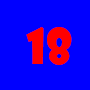
<style>
.page{position:relative;width:90px;height:90px;background:#0000ff}
.page>*{position:absolute;margin:0}
.t1{font:48px "ShowcardGothic-Reg";color:#ff0000}
</style>
<div class="page">
<p class="t1" style="left:26px;top:27px;width:46px;height:38px">18</p>
</div>
